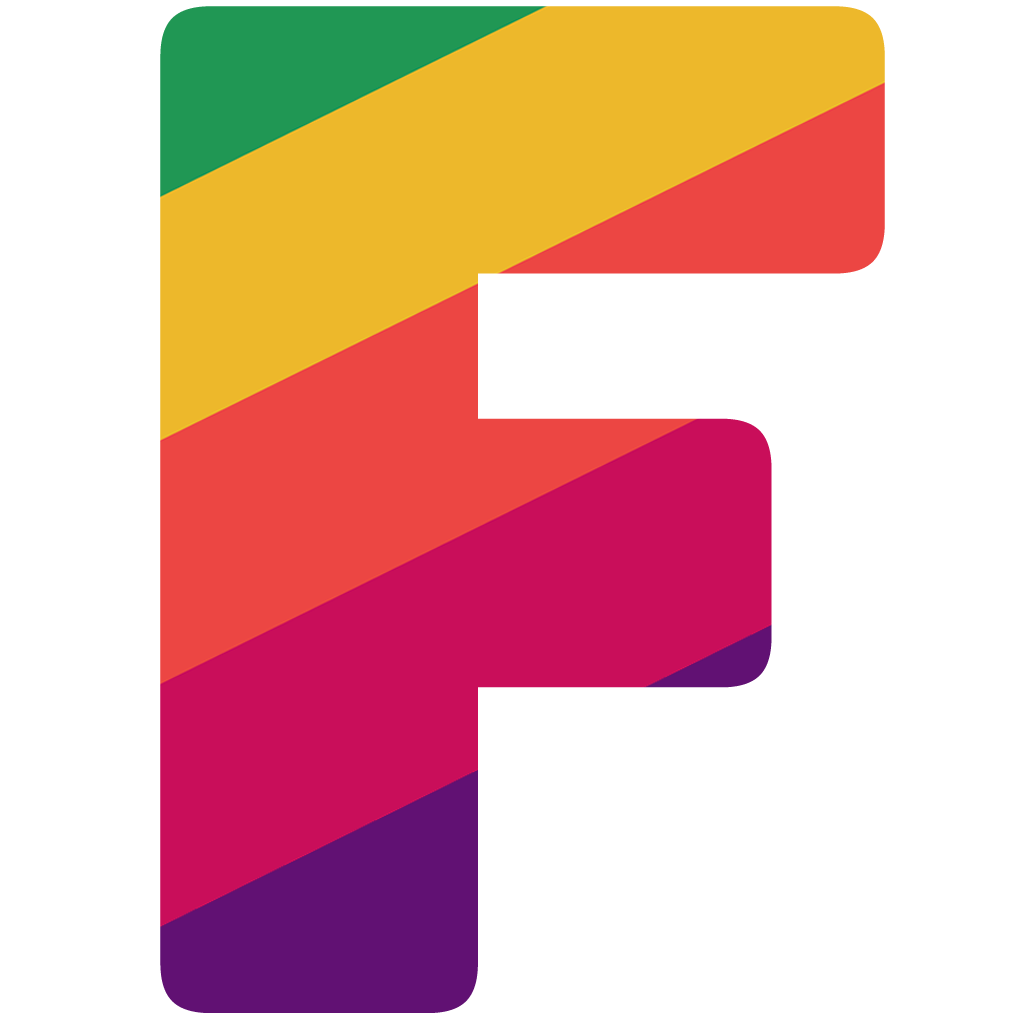
<style>
.page{position:relative;width:1024px;height:1024px;background:#ffffff}
.page>*{position:absolute;margin:0}
.t1{font:1398.1px "Bungee-Regular";letter-spacing:-0.025em}
</style>
<div class="page">
<p class="t1" style="left:160px;top:6px;width:725px;height:1007px">F</p>
</div>
